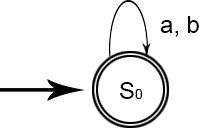
<style>
.page{position:relative;width:199px;height:128px;background:#ffffff}
.page>*{position:absolute;margin:0}
.t1{font:24px "ArialMT";color:#000000}
.t2{font:14px "ArialMT";color:#000000}
</style>
<div class="page">
<p class="t1" style="left:160px;top:16px;width:39px;height:21px">a, b</p>
<p class="t1" style="left:120px;top:82px;width:23px;height:17px">S<span class="t2">0</span></p>
</div>
